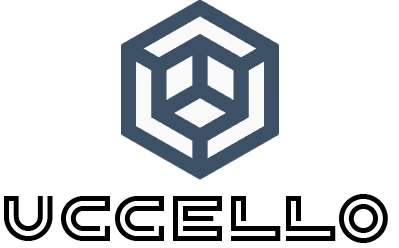
<style>
.page{position:relative;width:399px;height:248px;background:#ffffff}
.page>*{position:absolute;margin:0}
.t1{font:64px "Garde";color:#000000}
</style>
<div class="page">
<p class="t1" style="left:4px;top:194px;width:384px;height:49px">Uccello</p>
</div>
